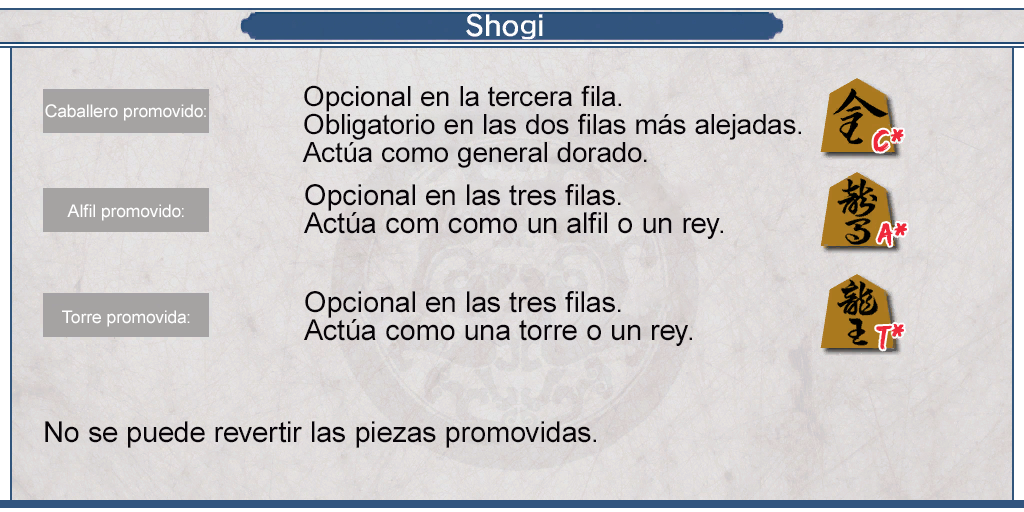
<style>
.page{position:relative;width:1024px;height:512px}
.page>*{position:absolute;margin:0}
.t1{font:28px/28px "ArialMT";color:#080408}
.t2{font:17.6px "ArialMT";color:#ffffff}
.t3{font:33px "EdoSZ";color:#ef283a;scale:0.94 1}
.t4{font:29px/28px "ArialMT";color:#080408}
.t5{font:27.1px "EdoSZ";color:#ef283a;scale:0.92 1}
.t6{font:30.1px "EdoSZ";color:#ef283a;scale:0.89 1}
.t7{font:29px "ArialMT";color:#080408}
</style>
<div class="page">
<p class="t1" style="left:302px;top:85px;width:499px;height:83px">Opcional en la tercera fila.<br>Obligatorio en las dos filas más alejadas.<br>Actúa como general dorado.</p>
<p class="t2" style="left:45px;top:104px;width:161px;height:17px">Caballero promovido:</p>
<p class="t3" style="left:873px;top:129px;width:16px;height:23px">c</p>
<p class="t4" style="left:304px;top:184px;width:419px;height:55px">Opcional en las tres filas.<br>Actúa com como un alfil o un rey.</p>
<p class="t2" style="left:67px;top:204px;width:117px;height:17px">Alfil promovido:</p>
<p class="t5" style="left:877px;top:223px;width:16px;height:23px">A</p>
<p class="t4" style="left:304px;top:291px;width:388px;height:55px">Opcional en las tres filas.<br>Actúa como una torre o un rey.</p>
<p class="t2" style="left:62px;top:310px;width:128px;height:17px">Torre promovida:</p>
<p class="t6" style="left:876px;top:325px;width:16px;height:25px">t</p>
<p class="t7" style="left:45px;top:421px;width:551px;height:27px">No se puede revertir las piezas promovidas.</p>
</div>
